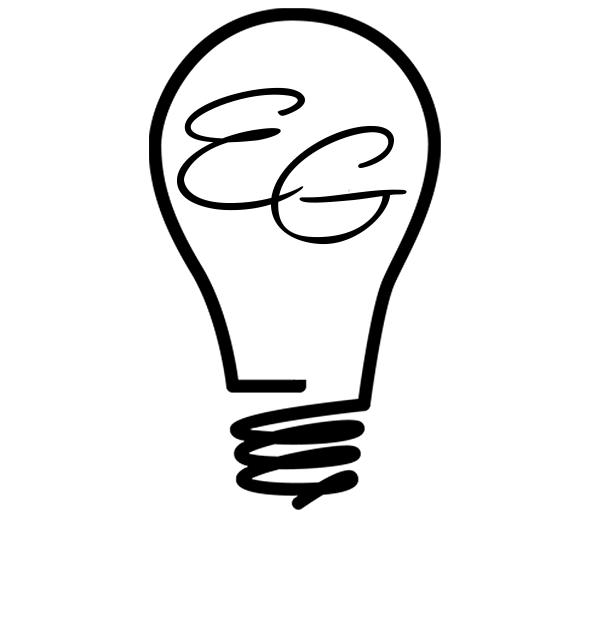
<style>
.page{position:relative;width:593px;height:633px;background:#ffffff}
.page>*{position:absolute;margin:0}
.t1{font:176.4px "HaloHandletter";color:#000000}
</style>
<div class="page">
<p class="t1" style="left:177px;top:87px;width:128px;height:124px">E</p>
<p class="t1" style="left:270px;top:125px;width:137px;height:120px">G</p>
</div>
